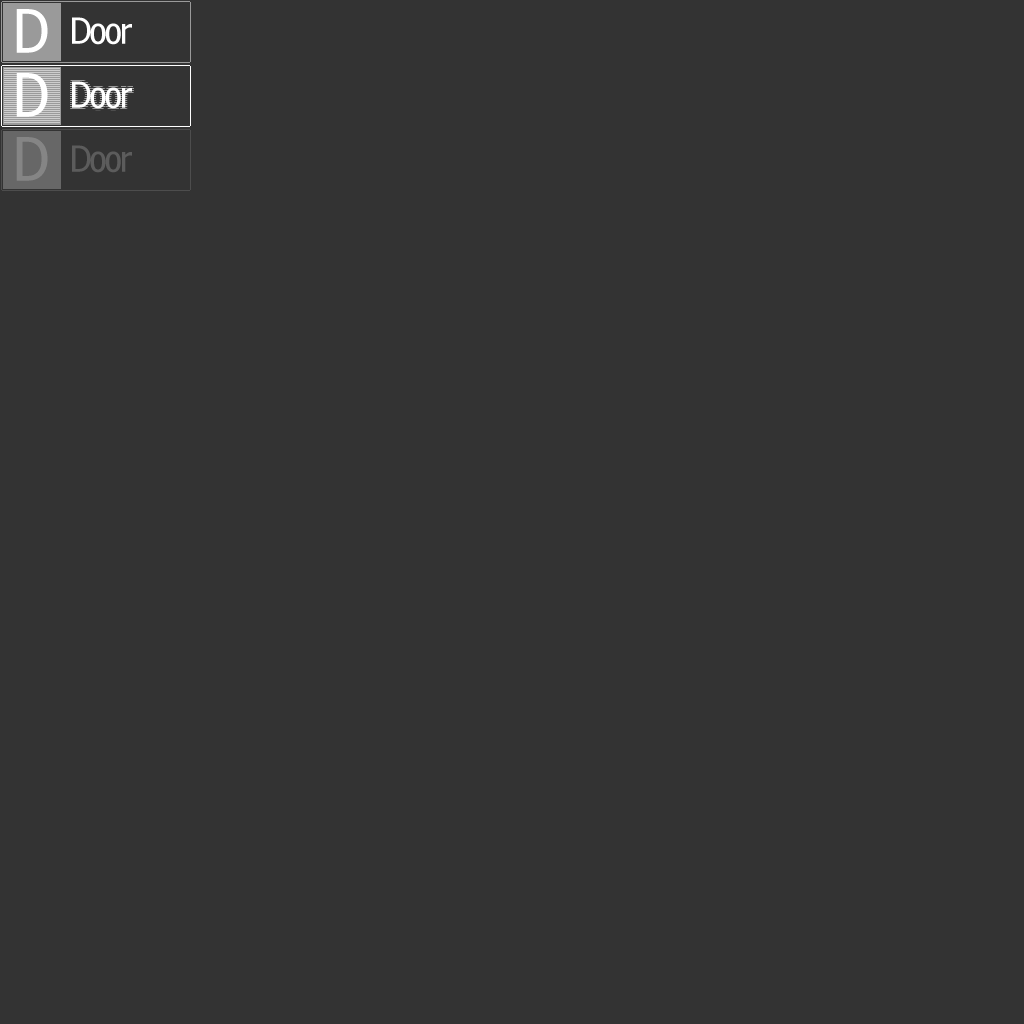
<style>
.page{position:relative;width:1024px;height:1024px;background:#333333}
.page>*{position:absolute;margin:0}
.t1{font:60px "Nina";color:#ffffff}
.t2{font:36px "Nina";letter-spacing:-0.04em;color:#ffffff}
.t3{font:60px "Nina";color:#858585}
.t4{font:36px "Nina";letter-spacing:-0.04em;color:#5c5c5c}
</style>
<div class="page">
<p class="t1" style="left:16px;top:9px;width:32px;height:44px">D</p>
<p class="t2" style="left:72px;top:17px;width:60px;height:28px">Door</p>
<p class="t1" style="left:16px;top:73px;width:32px;height:44px">D</p>
<p class="t2" style="left:72px;top:81px;width:60px;height:28px">Door</p>
<p class="t3" style="left:16px;top:137px;width:32px;height:44px">D</p>
<p class="t4" style="left:72px;top:145px;width:60px;height:28px">Door</p>
</div>
